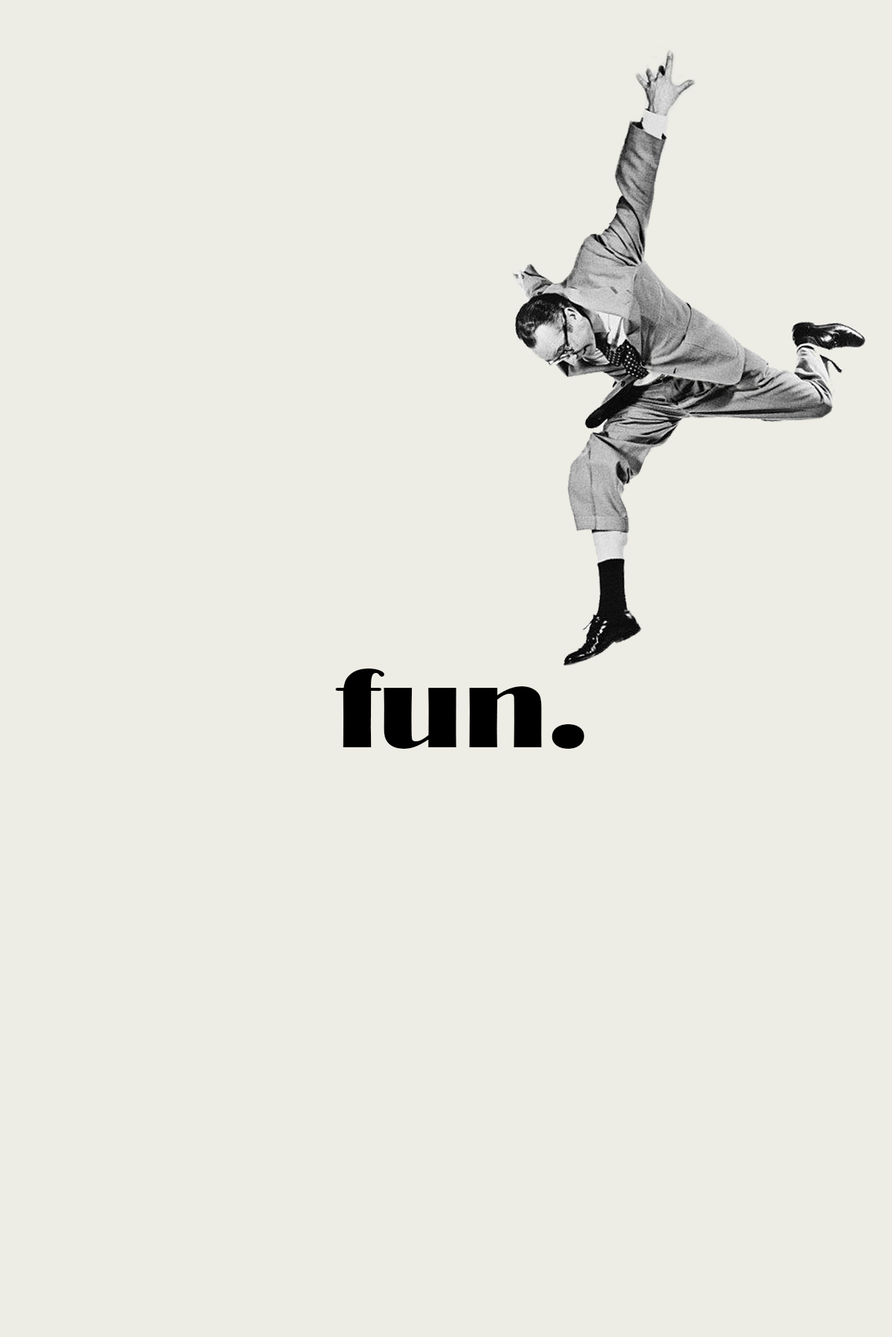
<style>
.page{position:relative;width:892px;height:1337px;background:#edede5}
.page>*{position:absolute;margin:0}
.t1{font:111.5px "Broadway";color:#000000}
</style>
<div class="page">
<p class="t1" style="left:335px;top:669px;width:249px;height:80px">fun.</p>
</div>
